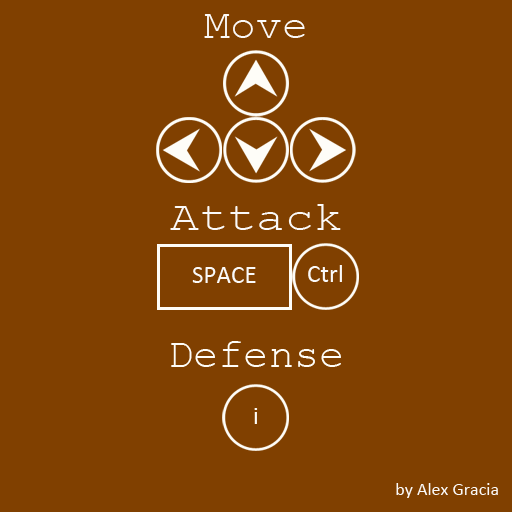
<style>
.page{position:relative;width:512px;height:512px;background:#804000}
.page>*{position:absolute;margin:0}
.t1{font:42.1px "CourierNewPSMT";color:#faf9f9}
.t2{font:42.1px "CourierNewPSMT";color:#faf9f9;scale:1.13 1}
.t3{font:25.3px "Calibri";color:#faf9f9}
.t4{font:42.1px "CourierNewPSMT";color:#fefdf8}
.t5{font:25.3px "Calibri";color:#fefdf8}
.t6{font:18px "Calibri";color:#faf9f9}
</style>
<div class="page">
<p class="t1" style="left:204px;top:14px;width:101px;height:24px">Move</p>
<p class="t2" style="left:170px;top:204px;width:171px;height:26px">Attack</p>
<p class="t3" style="left:192px;top:267px;width:64px;height:16px">SPACE</p>
<p class="t3" style="left:308px;top:265px;width:34px;height:17px">Ctrl</p>
<p class="t4" style="left:171px;top:341px;width:170px;height:26px">Defense</p>
<p class="t5" style="left:254px;top:408px;width:4px;height:16px">i</p>
<p class="t6" style="left:396px;top:483px;width:102px;height:15px">by Alex Gracia</p>
</div>
